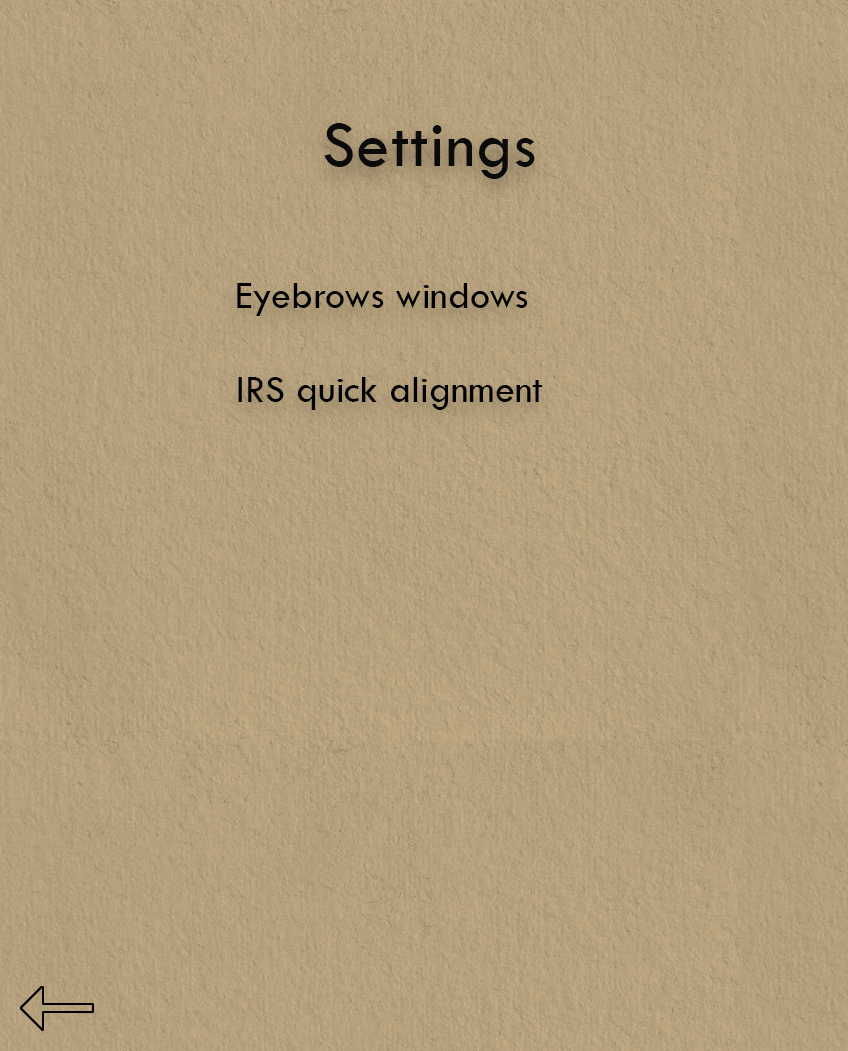
<style>
.page{position:relative;width:848px;height:1051px}
.page>*{position:absolute;margin:0}
.t1{font:66.7px "TwCenMT-Regular";letter-spacing:0.02em;color:#0d0d0d}
.t2{font:40px "TwCenMT-Regular";color:#000000}
</style>
<div class="page">
<p class="t1" style="left:324px;top:123px;width:211px;height:56px">Settings</p>
<p class="t2" style="left:237px;top:283px;width:291px;height:33px">Eyebrows windows</p>
<p class="t2" style="left:238px;top:377px;width:305px;height:33px">IRS quick alignment</p>
</div>
